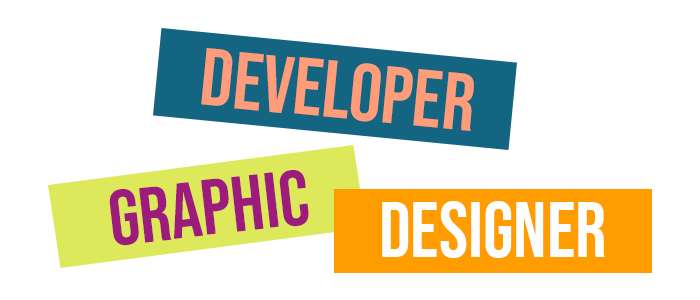
<style>
.page{position:relative;width:700px;height:300px;background:#ffffff}
.page>*{position:absolute;margin:0}
.t1{font:80.8px "BebasNeue-Regular";color:#ff9c79}
.t2{font:78.2px "BebasNeue-Regular";color:#9c1b7c}
.t3{font:78.2px "BebasNeue-Regular";color:#fffeff}
</style>
<div class="page">
<p class="t1" style="left:201px;top:48px;width:273px;height:83px;rotate:6deg">Developer</p>
<p class="t2" style="left:109px;top:170px;width:200px;height:76px;rotate:-6deg">Graphic</p>
<p class="t3" style="left:382px;top:201px;width:223px;height:57px">Designer</p>
</div>
